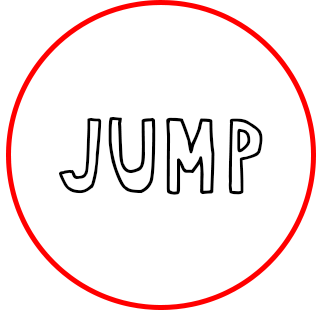
<style>
.page{position:relative;width:328px;height:310px;background:#ffffff}
.page>*{position:absolute;margin:0}
.t1{font:105.7px "FuenteManerismo";color:#000000}
</style>
<div class="page">
<p class="t1" style="left:59px;top:117px;width:204px;height:78px">Jump</p>
</div>
